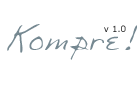
<style>
.page{position:relative;width:140px;height:90px;background:#ffffff}
.page>*{position:absolute;margin:0}
.t1{font:30.4px "Sharon";color:#758891}
.t2{font:8.6px "Verdana"}
</style>
<div class="page">
<p class="t1" style="left:7px;top:24px;width:130px;height:36px">Kompre!</p>
<p class="t2" style="left:104px;top:25px;width:22px;height:7px">v 1.0</p>
</div>
